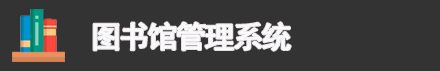
<style>
.page{position:relative;width:440px;height:71px;background:#333333}
.page>*{position:absolute;margin:0}
.t1{font:30px "SimHei";letter-spacing:-0.08em;color:#f7fbfd;font-weight:bold}
</style>
<div class="page">
<p class="t1" style="left:93px;top:22px;width:198px;height:29px">图书馆管理系统</p>
</div>
